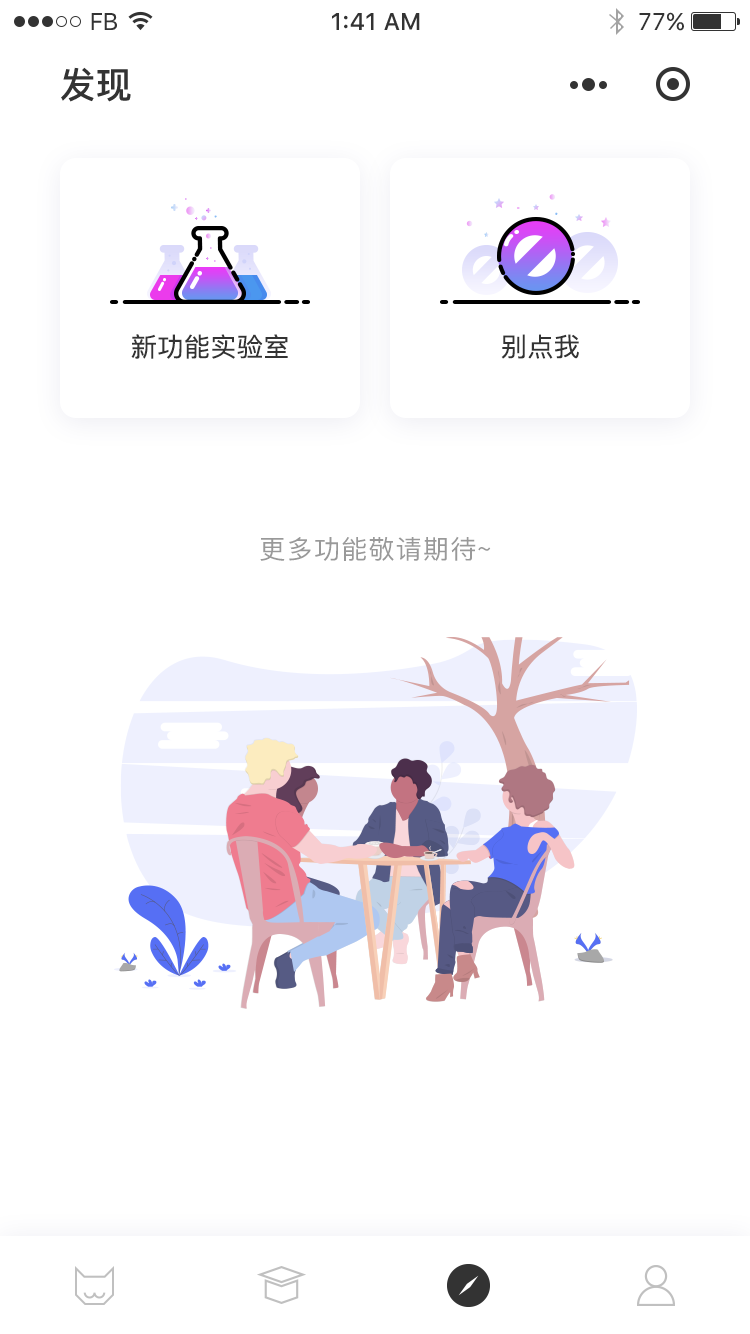
<style>
.page{position:relative;width:750px;height:1334px;background:#ffffff}
.page>*{position:absolute;margin:0}
.t1{font:24px "SFUIText-Regular";letter-spacing:-0.025em;color:#333333}
.t2{font:24px "SFUIText-Medium";color:#333333}
.t3{font:24px "SFUIText-Regular";color:#333333}
.t4{font:36px "PingFangSC-Medium";color:#333333}
.t5{font:26px "PingFangSC-Regular";letter-spacing:0.02em;color:#333333}
.t6{font:26px "PingFangSC-Regular";letter-spacing:0.05em;color:#999999}
</style>
<div class="page">
<p class="t1" style="left:91px;top:13px;width:26px;height:17px">FB</p>
<p class="t2" style="left:332px;top:13px;width:88px;height:17px">1:41 AM</p>
<p class="t3" style="left:639px;top:12px;width:45px;height:19px">77%</p>
<p class="t4" style="left:61px;top:67px;width:70px;height:35px">发现</p>
<p class="t5" style="left:131px;top:334px;width:157px;height:25px">新功能实验室</p>
<p class="t5" style="left:501px;top:334px;width:78px;height:25px">别点我</p>
<p class="t6" style="left:260px;top:536px;width:231px;height:25px">更多功能敬请期待~</p>
</div>
